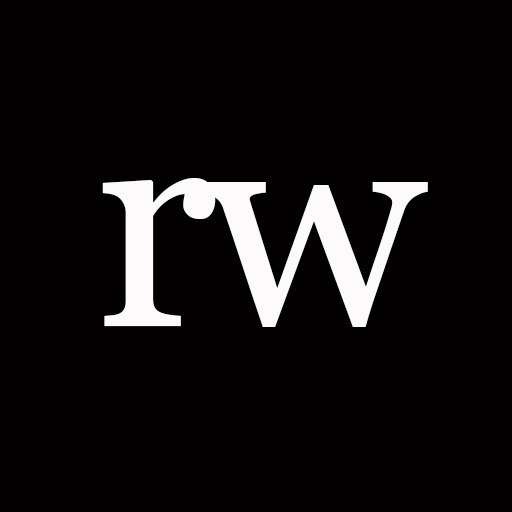
<style>
.page{position:relative;width:512px;height:512px;background:#020000}
.page>*{position:absolute;margin:0}
.t1{font:300px "Georgia";letter-spacing:-0.05em;color:#fcfafa}
</style>
<div class="page">
<p class="t1" style="left:102px;top:178px;width:326px;height:149px">rw</p>
</div>
